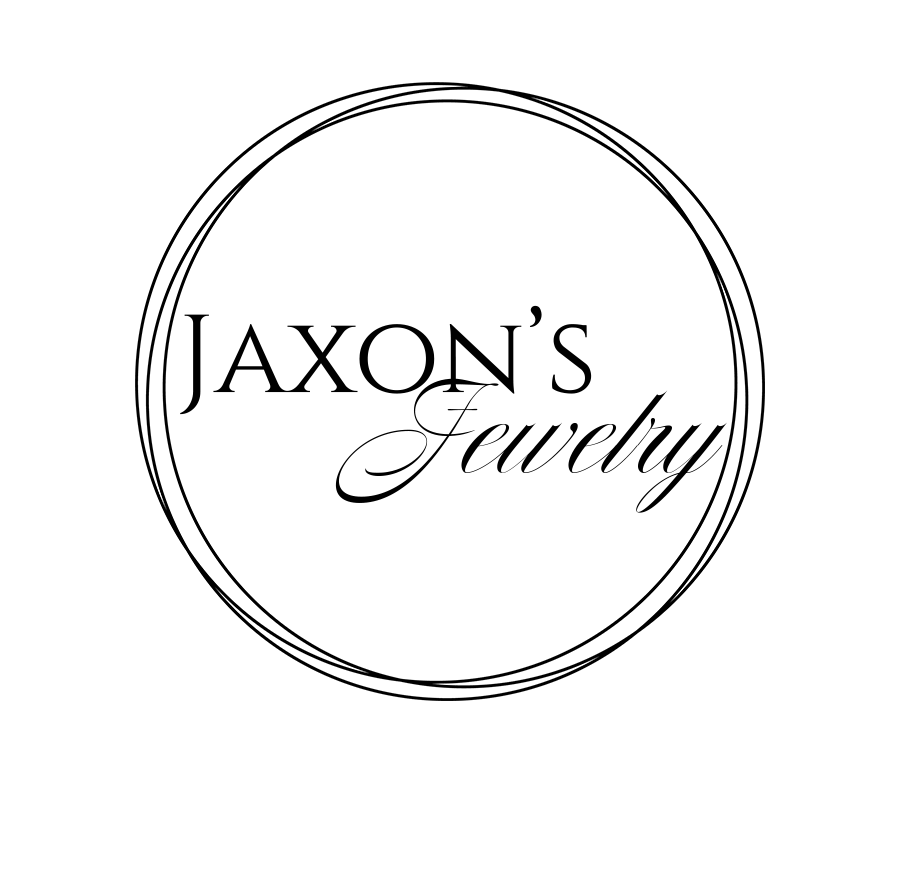
<style>
.page{position:relative;width:900px;height:885px;background:#ffffff}
.page>*{position:absolute;margin:0}
.t1{font:110.5px "Cinzel-Regular";color:#000000}
.t2{font:132.6px "Nautica-Regular";color:#000000;scale:1.09 1}
</style>
<div class="page">
<p class="t1" style="left:180px;top:305px;width:412px;height:110px">Jaxon’s</p>
<p class="t2" style="left:335px;top:378px;width:392px;height:135px">Jewelry</p>
</div>
